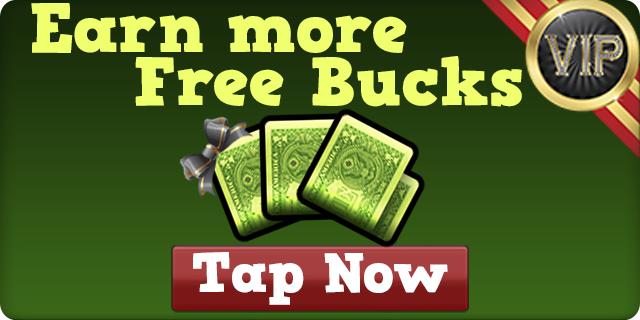
<style>
.page{position:relative;width:640px;height:320px}
.page>*{position:absolute;margin:0}
.t1{font:67.9px/53px "HVDComicSerifPro";color:#efff6d;scale:1.03 1}
.t2{font:55px "HVDComicSerifPro";color:#ffffff;scale:1.03 1}
</style>
<div class="page">
<p class="t1" style="left:31px;top:3px;width:491px;height:104px;text-align:center">Earn more<br>         Free Bucks</p>
<p class="t2" style="left:193px;top:252px;width:255px;height:53px">Tap Now</p>
</div>
